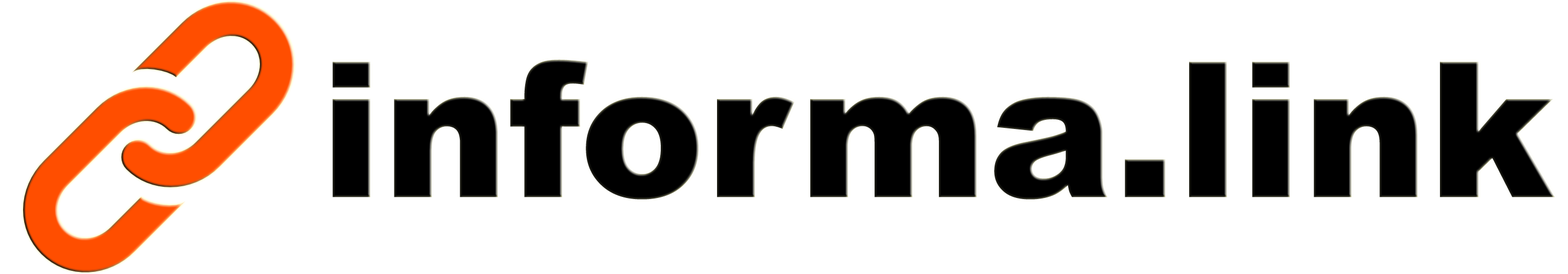
<style>
.page{position:relative;width:1568px;height:274px;background:#ffffff}
.page>*{position:absolute;margin:0}
.t1{font:189px "Arial-Black";color:#171717}
</style>
<div class="page">
<p class="t1" style="left:332px;top:59px;width:1223px;height:141px">informa.link</p>
</div>
